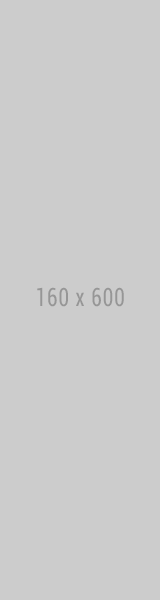
<style>
.page{position:relative;width:160px;height:600px;background:#cccccc}
.page>*{position:absolute;margin:0}
.t1{font:25px "Roboto-Condensed";letter-spacing:0.07em;color:#969696;scale:0.8 1}
</style>
<div class="page">
<p class="t1" style="left:37px;top:287px;width:87px;height:20px">160 x 600</p>
</div>
